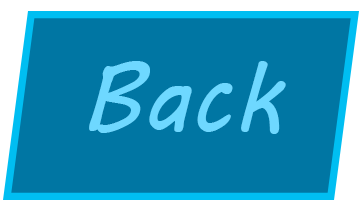
<style>
.page{position:relative;width:360px;height:216px;background:#0076a3}
.page>*{position:absolute;margin:0}
.t1{font:100px "MVBoli";color:#6ed9ff}
</style>
<div class="page">
<p class="t1" style="left:89px;top:61px;width:197px;height:73px">Back</p>
</div>
